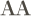
<style>
.page{position:relative;width:33px;height:16px;background:#ffffff}
.page>*{position:absolute;margin:0}
.t1{font:20px "RyuminPro-ExBold";letter-spacing:-0.08em;color:#4c4841}
</style>
<div class="page">
<p class="t1" style="left:0px;top:0px;width:31px;height:16px">AA</p>
</div>
